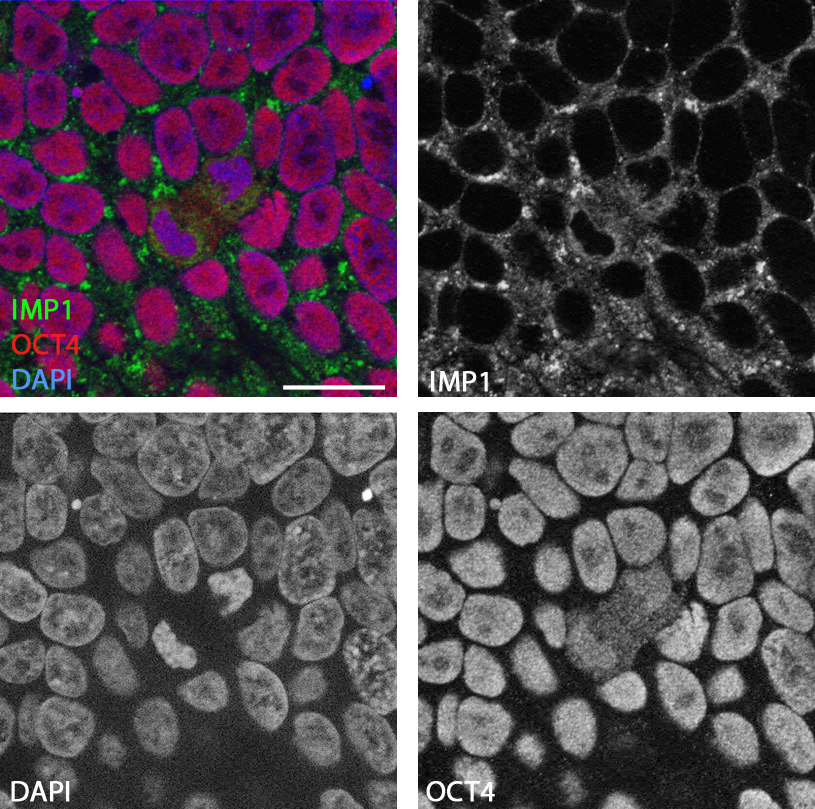
<style>
.page{position:relative;width:815px;height:809px}
.page>*{position:absolute;margin:0}
.t1{font:29.2px "MyriadPro-Regular";color:#13f80e;font-weight:bold}
.t2{font:29.2px "MyriadPro-Regular";color:#ef1d1d;font-weight:bold}
.t3{font:29.2px "MyriadPro-Regular";color:#5196f3;font-weight:bold}
.t4{font:29.2px "MyriadPro-Regular";color:#fcfafa;font-weight:bold}
.t5{font:29.2px "MyriadPro-Regular";color:#fefcfc;font-weight:bold}
</style>
<div class="page">
<p class="t1" style="left:12px;top:299px;width:69px;height:91px">IMP1<br><span class="t2">OCT4<br></span><span class="t3">DAPI</span></p>
<p class="t4" style="left:431px;top:371px;width:57px;height:21px">IMP1</p>
<p class="t5" style="left:11px;top:781px;width:59px;height:21px">DAPI</p>
<p class="t5" style="left:426px;top:781px;width:69px;height:21px">OCT4</p>
</div>
